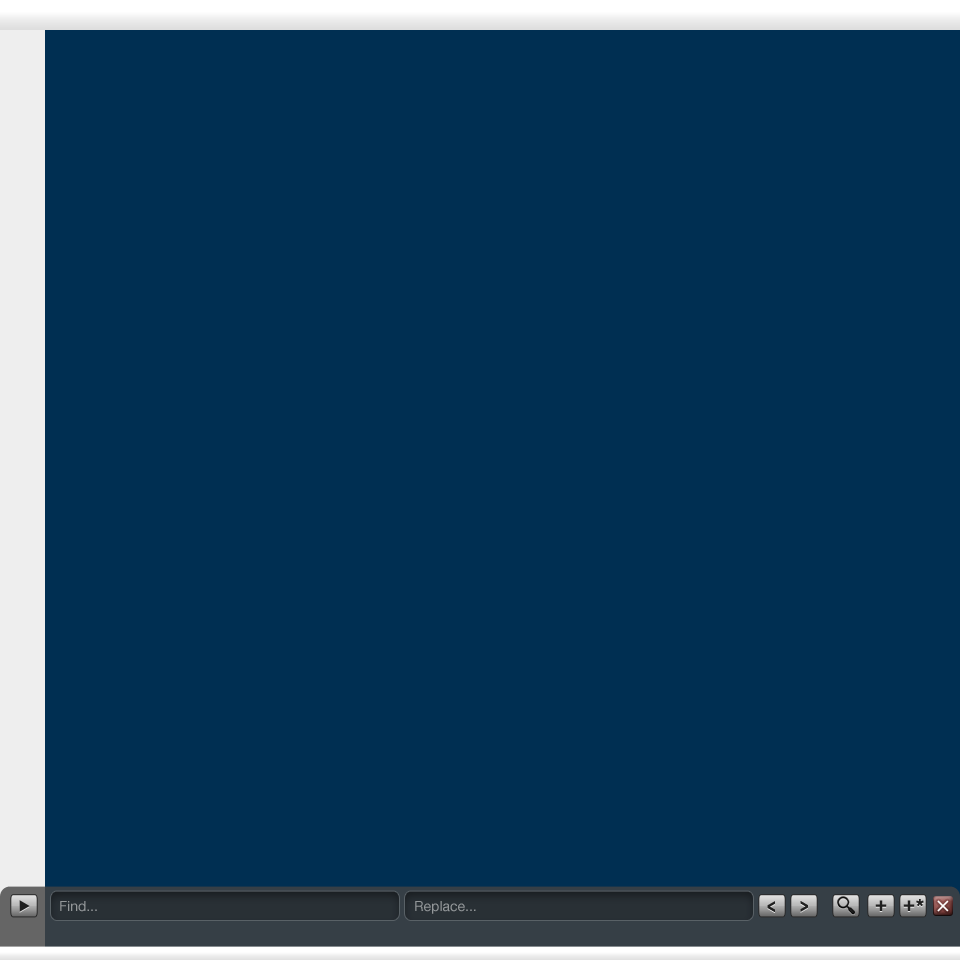
<style>
.page{position:relative;width:960px;height:960px;background:#002f52}
.page>*{position:absolute;margin:0}
.t1{font:14px "HelveticaNeue";color:#94989a}
.t2{font:20.2px "HelveticaNeue-Bold";color:#202020;scale:0.69 1}
.t3{font:20.2px "HelveticaNeue-Bold";color:#202020}
</style>
<div class="page">
<p class="t1" style="left:60px;top:901px;width:37px;height:11px">Find...</p>
<p class="t1" style="left:415px;top:901px;width:61px;height:13px">Replace...</p>
<p class="t2" style="left:767px;top:901px;width:8px;height:11px;rotate:180deg">&gt;</p>
<p class="t2" style="left:800px;top:901px;width:8px;height:11px">&gt;</p>
<p class="t3" style="left:875px;top:900px;width:12px;height:11px;rotate:180deg">+</p>
<p class="t3" style="left:903px;top:900px;width:12px;height:11px;rotate:180deg">+</p>
<p class="t3" style="left:916px;top:899px;width:8px;height:8px">*</p>
</div>
